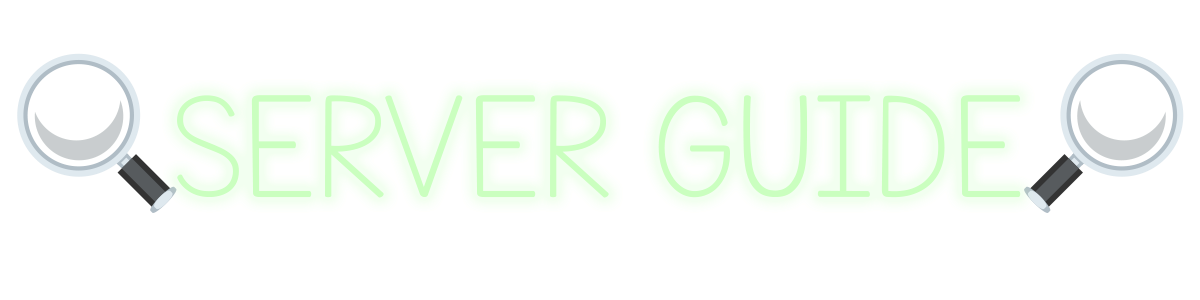
<style>
.page{position:relative;width:1200px;height:300px;background:#ffffff}
.page>*{position:absolute;margin:0}
.t1{font:171.7px "KGNeatlyPrinted";color:#caffbf}
</style>
<div class="page">
<p class="t1" style="left:177px;top:95px;width:844px;height:103px">SERVER GUIDE</p>
</div>
